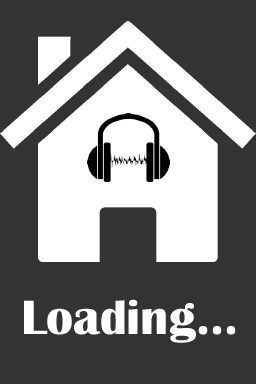
<style>
.page{position:relative;width:256px;height:384px;background:#333333}
.page>*{position:absolute;margin:0}
.t1{font:50px "BritannicBold";color:#ffffff}
</style>
<div class="page">
<p class="t1" style="left:24px;top:299px;width:212px;height:44px">Loading...</p>
</div>
